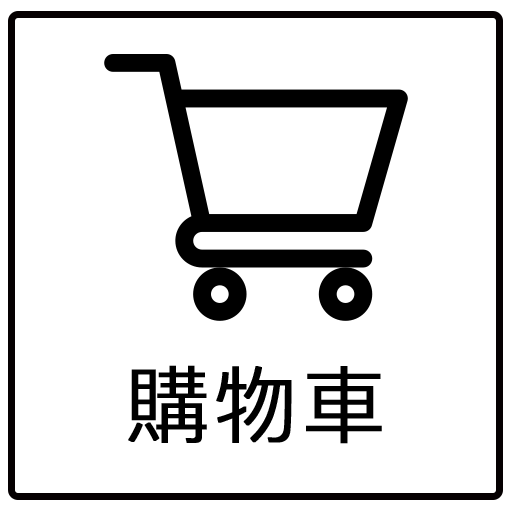
<style>
.page{position:relative;width:512px;height:512px;background:#ffffff}
.page>*{position:absolute;margin:0}
.t1{font:83.3px "PingFangTC-Light";letter-spacing:0.026em;color:#000000;font-weight:bold}
</style>
<div class="page">
<p class="t1" style="left:128px;top:365px;width:254px;height:79px">購物車</p>
</div>
